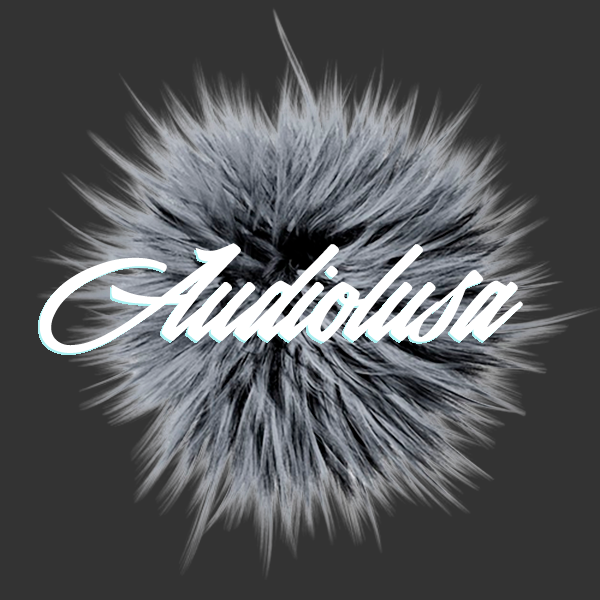
<style>
.page{position:relative;width:600px;height:600px;background:#333333}
.page>*{position:absolute;margin:0}
.t1{font:160px "Valencia";color:#ffffff}
</style>
<div class="page">
<p class="t1" style="left:39px;top:243px;width:484px;height:110px">Audiolusa</p>
</div>
